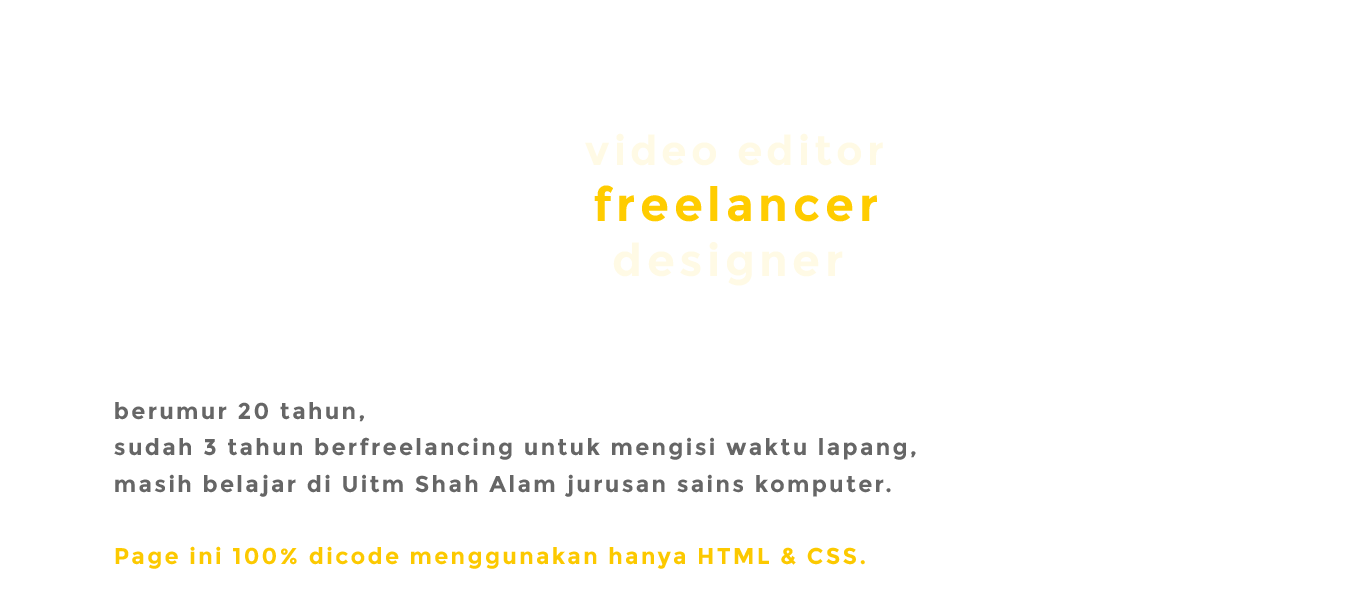
<style>
.page{position:relative;width:1366px;height:598px;background:#ffffff}
.page>*{position:absolute;margin:0}
.t1{font:41.2px "Montserrat-Bold";letter-spacing:0.1em;color:#fffae5}
.t2{font:46.9px "Montserrat-Bold";letter-spacing:0.1em;color:#ffffff}
.t3{font:46.9px "Montserrat-Bold";letter-spacing:0.1em;color:#ffcc00}
.t4{font:45px "Montserrat-Bold";letter-spacing:0.1em;color:#fffae5}
.t5{font:22.8px/36.4px "Montserrat-Bold";letter-spacing:0.1em;color:#666666}
.t6{font:22.8px/36.4px "Montserrat-Bold";letter-spacing:0.1em;color:#fcc900}
</style>
<div class="page">
<p class="t1" style="left:585px;top:133px;width:298px;height:33px">video editor</p>
<p class="t2" style="left:118px;top:185px;width:759px;height:46px">Hi, saya seorang <span class="t3">freelancer</span></p>
<p class="t4" style="left:613px;top:242px;width:230px;height:44px">designer</p>
<p class="t5" style="left:114px;top:402px;width:802px;height:167px">berumur 20 tahun,<br>sudah 3 tahun berfreelancing untuk mengisi waktu lapang,<br>masih belajar di Uitm Shah Alam jurusan sains komputer.<br><span class="t6"><br>Page ini 100% dicode menggunakan hanya HTML &amp; CSS.</span></p>
</div>
